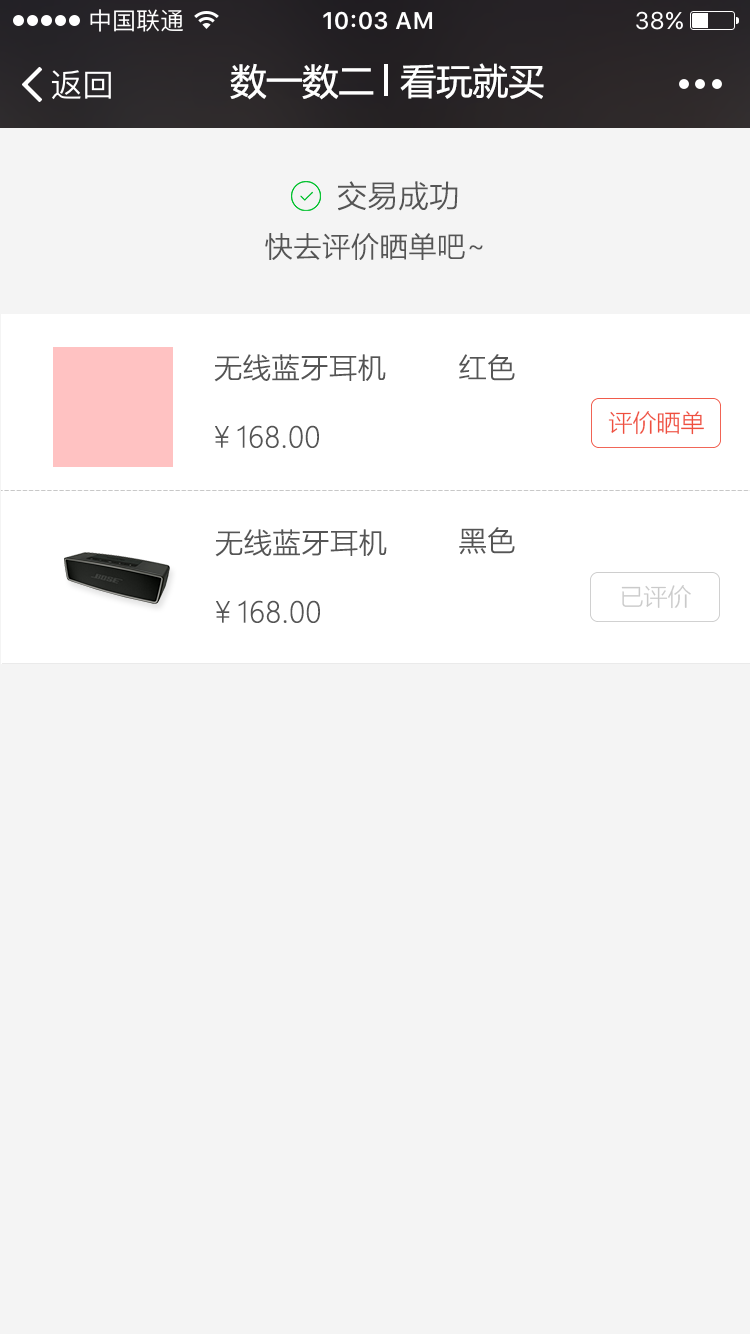
<style>
.page{position:relative;width:750px;height:1334px;background:#f4f4f4}
.page>*{position:absolute;margin:0}
.t1{font:36px "MicrosoftYaHei";color:#ffffff}
.t2{font:30px "MicrosoftYaHeiLight";color:#555555;font-weight:bold}
.t3{font:28px "MicrosoftYaHeiLight";color:#555555;font-weight:bold}
.t4{font:24px "MicrosoftYaHeiLight";color:#ef4f3e}
.t5{font:24px "MicrosoftYaHeiLight";color:#cacaca}
</style>
<div class="page">
<p class="t1" style="left:230px;top:63px;width:144px;height:37px">数一数二</p>
<p class="t1" style="left:400px;top:63px;width:144px;height:36px">看玩就买</p>
<p class="t2" style="left:338px;top:181px;width:120px;height:30px">交易成功</p>
<p class="t3" style="left:265px;top:233px;width:218px;height:27px">快去评价晒单吧~</p>
<p class="t3" style="left:214px;top:354px;width:172px;height:28px">无线蓝牙耳机</p>
<p class="t3" style="left:459px;top:354px;width:56px;height:27px">红色</p>
<p class="t4" style="left:608px;top:411px;width:96px;height:24px">评价晒单</p>
<p class="t3" style="left:215px;top:425px;width:104px;height:23px">￥168.00</p>
<p class="t3" style="left:215px;top:529px;width:172px;height:28px">无线蓝牙耳机</p>
<p class="t3" style="left:459px;top:527px;width:56px;height:28px">黑色</p>
<p class="t5" style="left:621px;top:585px;width:70px;height:24px">已评价</p>
<p class="t3" style="left:216px;top:600px;width:104px;height:23px">￥168.00</p>
</div>
